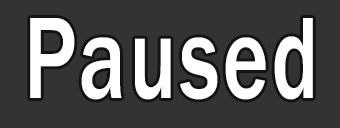
<style>
.page{position:relative;width:340px;height:128px;background:#333333}
.page>*{position:absolute;margin:0}
.t1{font:120px "FranklinGothic-Medium";letter-spacing:0.04em;color:#ffffff;scale:0.72 1}
</style>
<div class="page">
<p class="t1" style="left:30px;top:18px;width:283px;height:82px">Paused</p>
</div>
